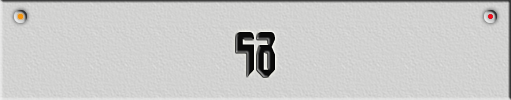
<style>
.page{position:relative;width:511px;height:100px}
.page>*{position:absolute;margin:0}
.t1{font:60px "Fedyral";color:#0a0a0a}
</style>
<div class="page">
<p class="t1" style="left:236px;top:32px;width:39px;height:45px">98</p>
</div>
